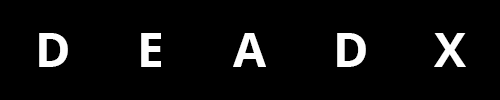
<style>
.page{position:relative;width:500px;height:100px;background:#000000}
.page>*{position:absolute;margin:0}
.t1{font:48px "OpenSans-Bold";color:#fefefe}
</style>
<div class="page">
<p class="t1" style="left:39px;top:33px;width:29px;height:34px">D</p>
<p class="t1" style="left:141px;top:33px;width:20px;height:34px">E</p>
<p class="t1" style="left:233px;top:33px;width:33px;height:34px">A</p>
<p class="t1" style="left:337px;top:33px;width:29px;height:34px">D</p>
<p class="t1" style="left:434px;top:33px;width:32px;height:34px">X</p>
</div>
